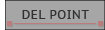
<style>
.page{position:relative;width:105px;height:30px;background:#a6a6a6}
.page>*{position:absolute;margin:0}
.t1{font:12px "PTSans-Caption";letter-spacing:0.05em;color:#313131}
</style>
<div class="page">
<p class="t1" style="left:22px;top:10px;width:67px;height:9px">DEL POINT</p>
</div>
